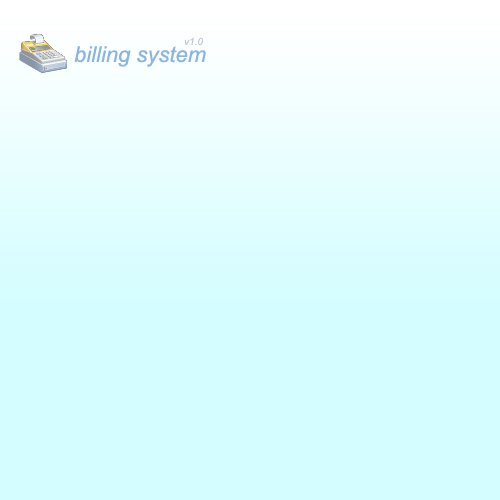
<style>
.page{position:relative;width:500px;height:500px;background:#d3fdff}
.page>*{position:absolute;margin:0}
.t1{font:10px "Arial-ItalicMT";color:#c0c9d3}
.t2{font:22px "Arial-ItalicMT";color:#89b5e0}
</style>
<div class="page">
<p class="t1" style="left:184px;top:37px;width:19px;height:9px">v1.0</p>
<p class="t2" style="left:74px;top:46px;width:132px;height:21px">billing system</p>
</div>
